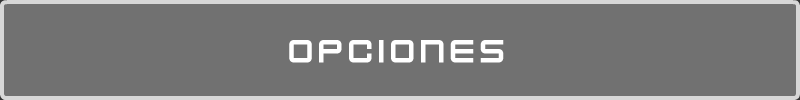
<style>
.page{position:relative;width:800px;height:100px;background:#717171}
.page>*{position:absolute;margin:0}
.t1{font:36px "KenVector-Future";color:#ffffff}
</style>
<div class="page">
<p class="t1" style="left:289px;top:40px;width:215px;height:23px">opciones</p>
</div>
